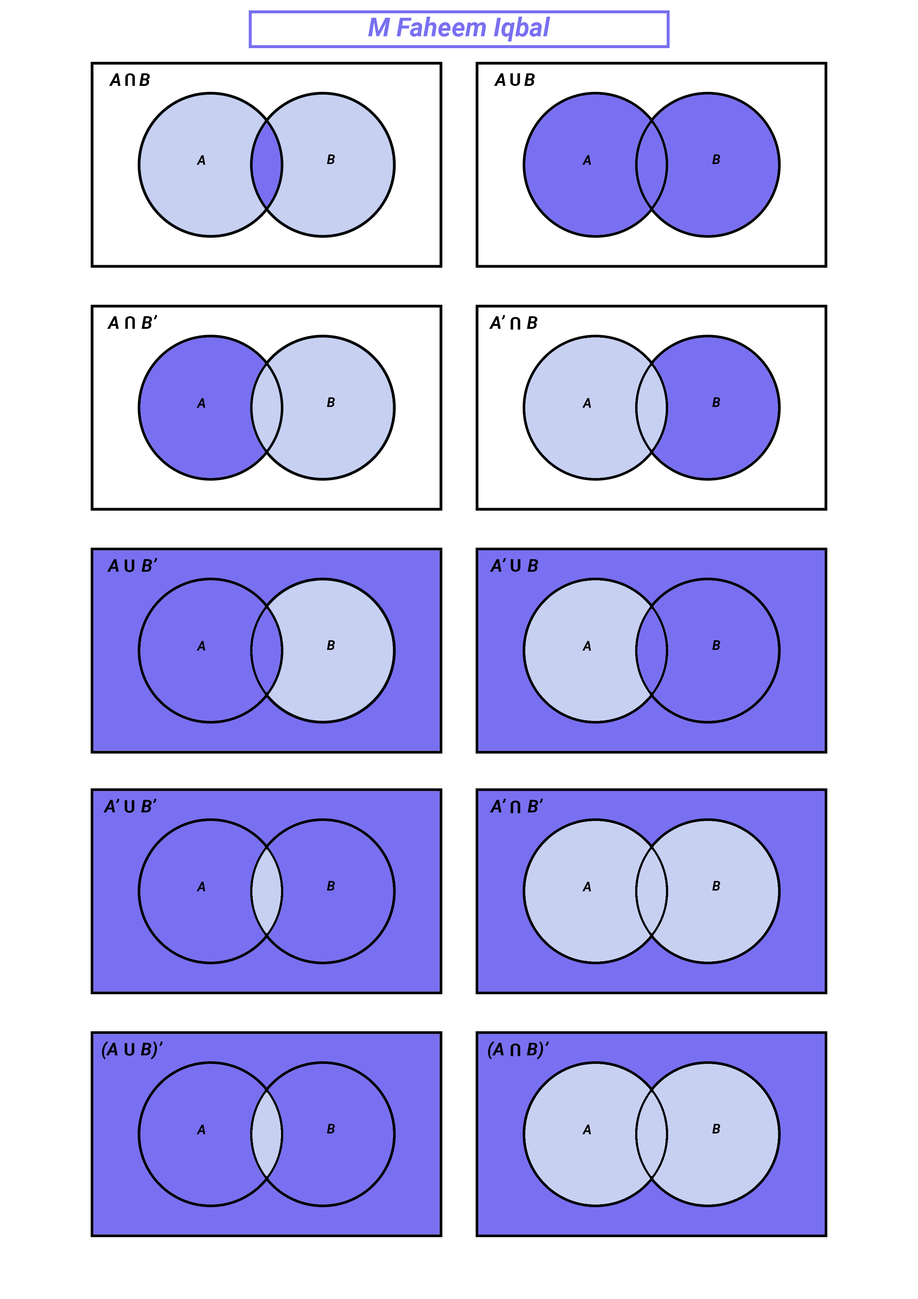
<style>
.page{position:relative;width:918px;height:1299px;background:#ffffff}
.page>*{position:absolute;margin:0}
.t1{font:25.9px "Roboto-BoldItalic";color:#7970f1}
.t2{font:17.8px "Roboto-BoldItalic";color:#000000}
.t3{font:17.8px "Roboto-Bold";color:#000000}
.t4{font:13.3px "Roboto-BoldItalic";color:#000000}
</style>
<div class="page">
<p class="t1" style="left:368px;top:17px;width:183px;height:24px">M Faheem Iqbal</p>
<p class="t2" style="left:109px;top:73px;width:41px;height:13px">A    B</p>
<p class="t3" style="left:125px;top:73px;width:10px;height:13px;rotate:180deg">U</p>
<p class="t2" style="left:494px;top:73px;width:41px;height:13px">A    B</p>
<p class="t3" style="left:510px;top:73px;width:10px;height:13px">U</p>
<p class="t4" style="left:197px;top:155px;width:8px;height:10px">A</p>
<p class="t4" style="left:327px;top:154px;width:8px;height:10px">B</p>
<p class="t4" style="left:582px;top:155px;width:9px;height:10px">A</p>
<p class="t4" style="left:712px;top:154px;width:8px;height:10px">B</p>
<p class="t2" style="left:107px;top:315px;width:50px;height:14px">A     B’</p>
<p class="t3" style="left:125px;top:316px;width:10px;height:13px;rotate:180deg">U</p>
<p class="t2" style="left:489px;top:315px;width:49px;height:14px">A’     B</p>
<p class="t3" style="left:511px;top:317px;width:10px;height:12px;rotate:180deg">U</p>
<p class="t4" style="left:197px;top:398px;width:8px;height:10px">A</p>
<p class="t4" style="left:327px;top:397px;width:8px;height:10px">B</p>
<p class="t4" style="left:582px;top:398px;width:9px;height:10px">A</p>
<p class="t4" style="left:712px;top:397px;width:8px;height:10px">B</p>
<p class="t2" style="left:107px;top:558px;width:50px;height:14px">A     B’</p>
<p class="t2" style="left:490px;top:558px;width:48px;height:14px">A’     B</p>
<p class="t3" style="left:124px;top:559px;width:10px;height:13px">U</p>
<p class="t3" style="left:511px;top:559px;width:10px;height:13px">U</p>
<p class="t4" style="left:197px;top:641px;width:8px;height:9px">A</p>
<p class="t4" style="left:327px;top:640px;width:8px;height:10px">B</p>
<p class="t4" style="left:582px;top:641px;width:9px;height:9px">A</p>
<p class="t4" style="left:712px;top:640px;width:8px;height:10px">B</p>
<p class="t2" style="left:103px;top:799px;width:54px;height:13px">A’     B’</p>
<p class="t3" style="left:124px;top:800px;width:10px;height:13px">U</p>
<p class="t2" style="left:490px;top:799px;width:53px;height:13px">A’     B’</p>
<p class="t3" style="left:511px;top:800px;width:10px;height:13px;rotate:180deg">U</p>
<p class="t4" style="left:197px;top:881px;width:8px;height:10px">A</p>
<p class="t4" style="left:327px;top:881px;width:8px;height:9px">B</p>
<p class="t4" style="left:582px;top:881px;width:9px;height:10px">A</p>
<p class="t4" style="left:712px;top:881px;width:8px;height:9px">B</p>
<p class="t2" style="left:102px;top:1041px;width:61px;height:18px">(A     B)’</p>
<p class="t3" style="left:124px;top:1043px;width:10px;height:13px">U</p>
<p class="t2" style="left:488px;top:1041px;width:61px;height:18px">(A     B)’</p>
<p class="t3" style="left:511px;top:1043px;width:10px;height:13px;rotate:180deg">U</p>
<p class="t4" style="left:197px;top:1124px;width:8px;height:10px">A</p>
<p class="t4" style="left:327px;top:1124px;width:8px;height:9px">B</p>
<p class="t4" style="left:582px;top:1124px;width:9px;height:10px">A</p>
<p class="t4" style="left:712px;top:1124px;width:8px;height:9px">B</p>
</div>
